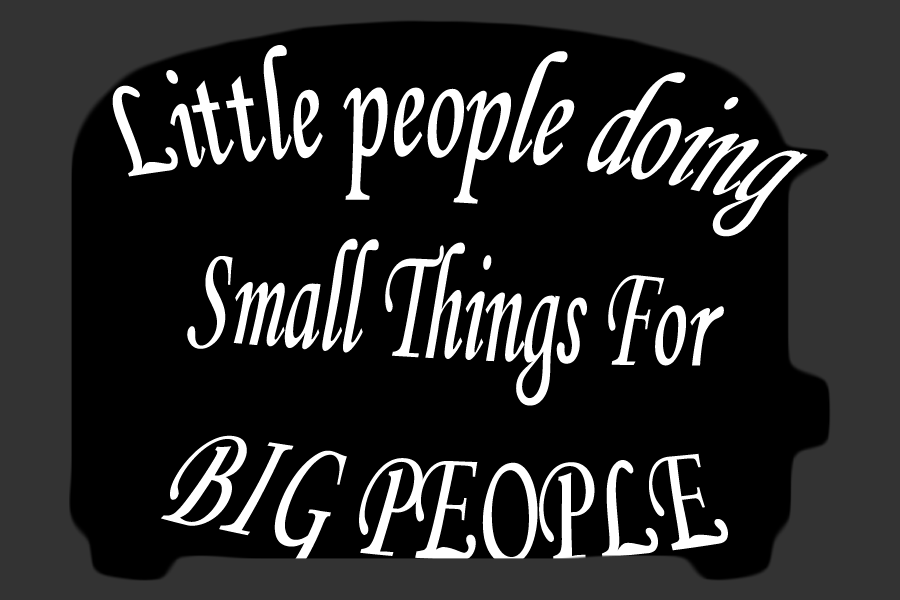
<style>
.page{position:relative;width:900px;height:600px;background:#000000}
.page>*{position:absolute;margin:0}
.t1{font:129.5px "MonotypeCorsiva";color:#ffffff;scale:0.93 1}
</style>
<div class="page">
<p class="t1" style="left:112px;top:45px;width:696px;height:539px;text-align:center;rotate:3deg">Little people doing <br>Small Things For<br>BIG PEOPLE</p>
</div>
